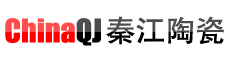
<style>
.page{position:relative;width:227px;height:61px;background:#ffffff}
.page>*{position:absolute;margin:0}
.t1{font:30px "FZHTJW--GB1-0"}
.t2{font:30px "Impact"}
</style>
<div class="page">
<p class="t1" style="left:106px;top:16px;width:118px;height:29px">秦江陶瓷</p>
<p class="t2" style="left:5px;top:18px;width:96px;height:28px">ChinaQJ</p>
</div>
